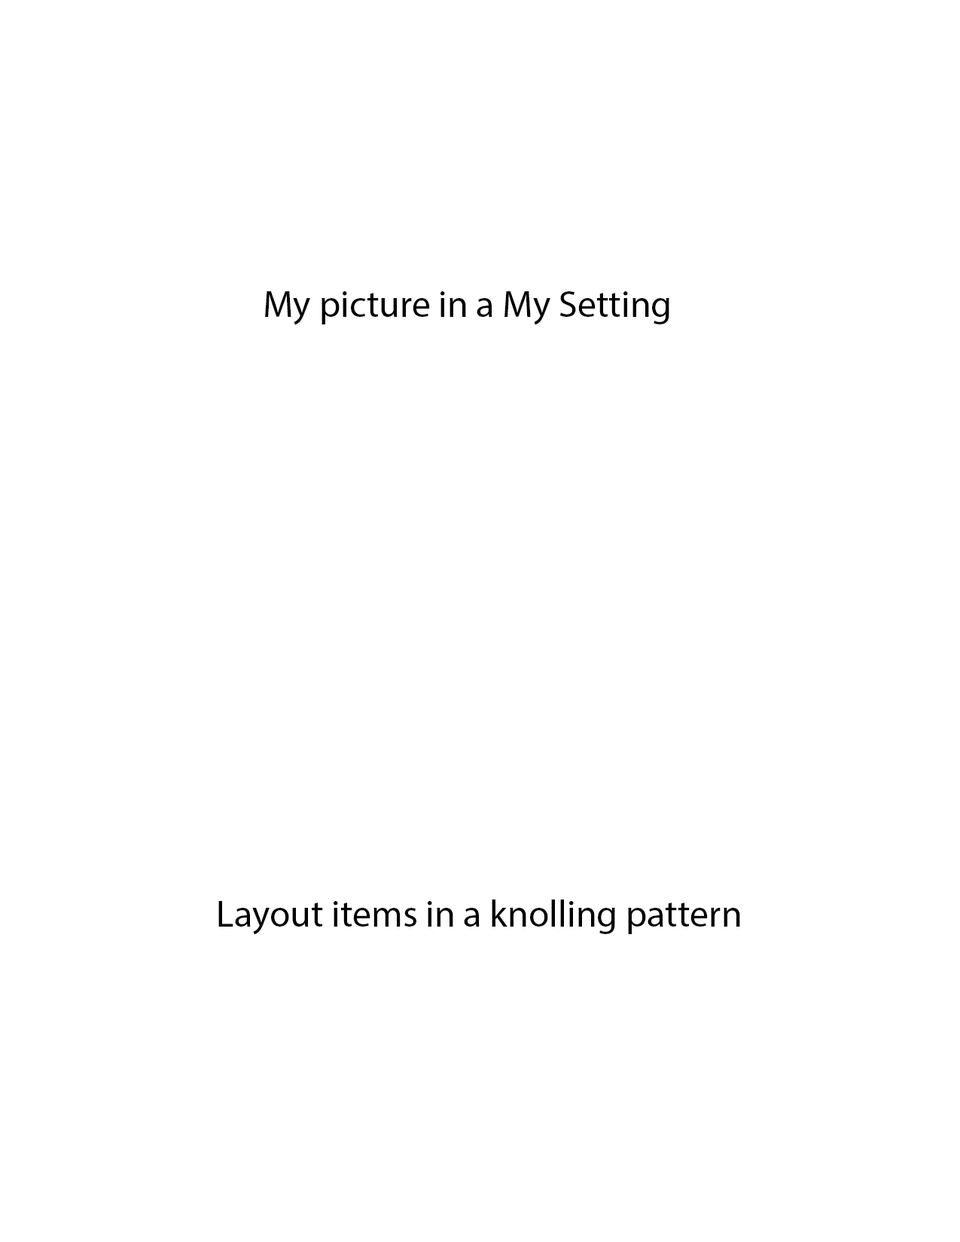
<style>
.page{position:relative;width:960px;height:1242px;background:#ffffff}
.page>*{position:absolute;margin:0}
.t1{font:37.6px "MyriadPro-Regular";color:#000000}
</style>
<div class="page">
<p class="t1" style="left:265px;top:291px;width:404px;height:34px">My picture in a My Setting</p>
<p class="t1" style="left:218px;top:900px;width:522px;height:35px">Layout items in a knolling pattern</p>
</div>
